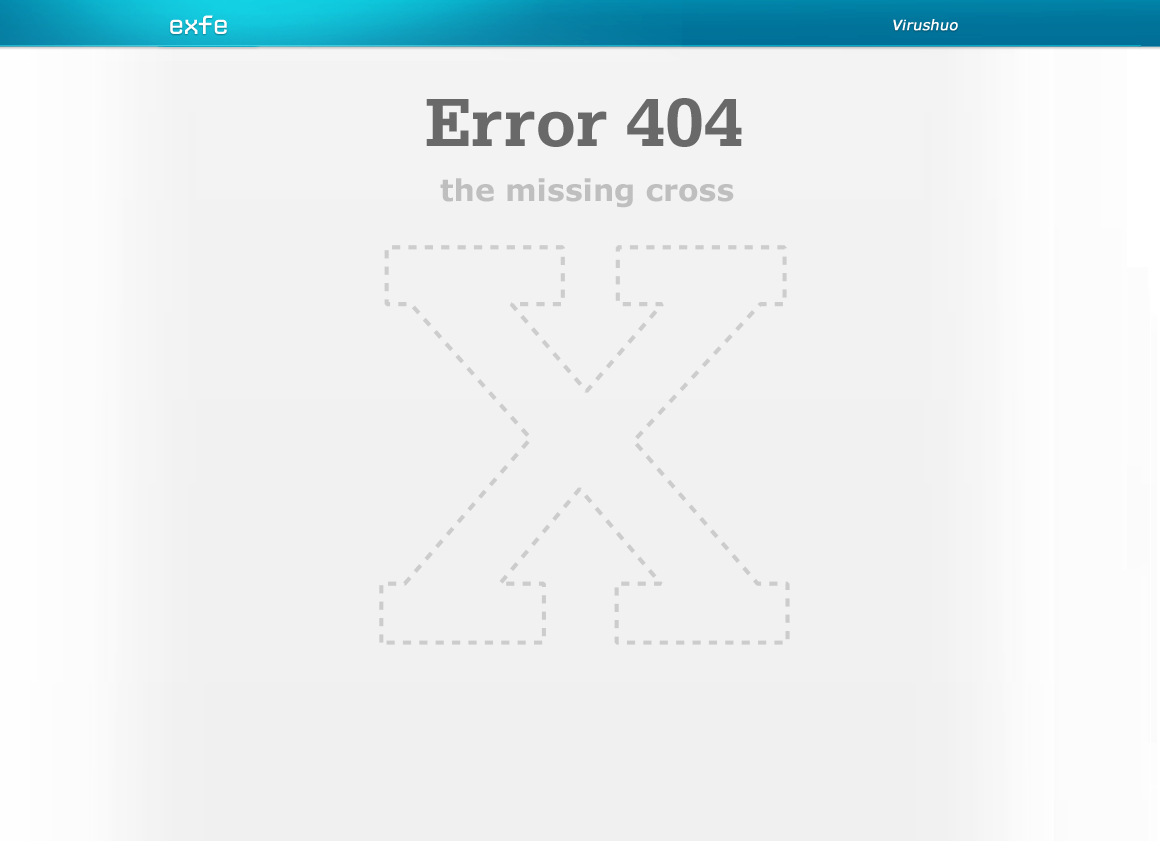
<style>
.page{position:relative;width:1160px;height:841px;background:#f1f1f1}
.page>*{position:absolute;margin:0}
.t1{font:72px "SerifaBT-Bold";color:#696969}
.t2{font:30px "Verdana-Bold";color:#bfbfbf}
</style>
<div class="page">
<p class="t1" style="left:426px;top:98px;width:316px;height:49px">Error 404</p>
<p class="t2" style="left:440px;top:178px;width:294px;height:30px">the missing cross</p>
</div>
